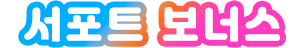
<style>
.page{position:relative;width:304px;height:48px;background:#ffffff}
.page>*{position:absolute;margin:0}
.t1{font:37.3px "Jalnan";letter-spacing:0.1em;color:#ffffff;text-transform:uppercase}
</style>
<div class="page">
<p class="t1" style="left:24px;top:6px;width:256px;height:36px">서포트 보너스</p>
</div>
